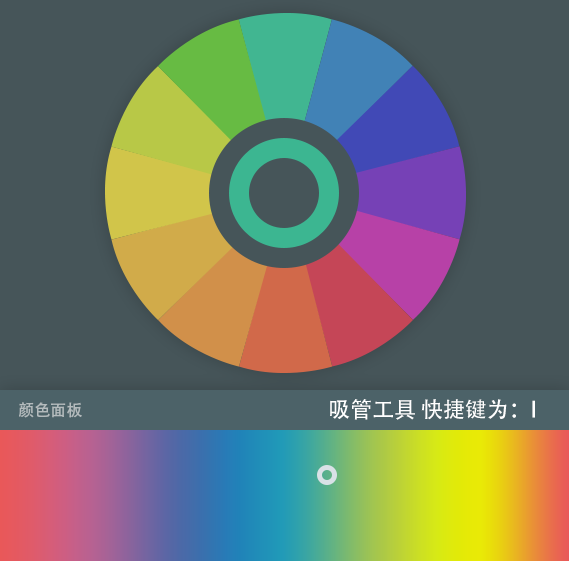
<style>
.page{position:relative;width:569px;height:561px;background:#465559}
.page>*{position:absolute;margin:0}
.t1{font:21.9px "AdobeHeitiStd-Regular";color:#ffffff}
.t2{font:16px "AdobeHeitiStd-Regular";color:#b4bbbd}
</style>
<div class="page">
<p class="t1" style="left:330px;top:399px;width:205px;height:21px">吸管工具 快捷键为：I</p>
<p class="t2" style="left:19px;top:402px;width:63px;height:16px">颜色面板</p>
</div>
